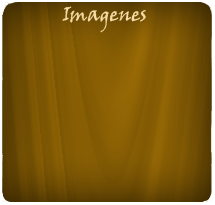
<style>
.page{position:relative;width:215px;height:205px}
.page>*{position:absolute;margin:0}
.t1{font:20px "VinerHandITC";color:#f6dda6}
</style>
<div class="page">
<p class="t1" style="left:62px;top:6px;width:84px;height:27px">Imagenes</p>
</div>
